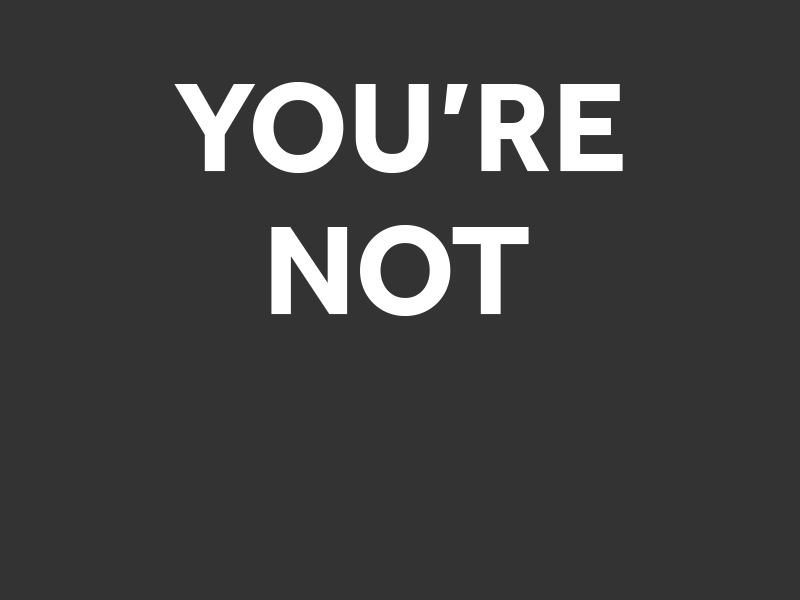
<style>
.page{position:relative;width:800px;height:600px;background:#333333}
.page>*{position:absolute;margin:0}
.t1{font:129.7px "Effra-Bold";color:#ffffff}
</style>
<div class="page">
<p class="t1" style="left:174px;top:82px;width:449px;height:91px">YOU’RE</p>
<p class="t1" style="left:271px;top:225px;width:258px;height:91px">NOT</p>
</div>
